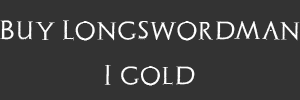
<style>
.page{position:relative;width:300px;height:100px;background:#333333}
.page>*{position:absolute;margin:0}
.t1{font:20.8px "Archeologicaps";color:#ffffff}
</style>
<div class="page">
<p class="t1" style="left:0px;top:20px;width:300px;height:21px">Buy Longswordman</p>
<p class="t1" style="left:104px;top:64px;width:91px;height:22px">I gold</p>
</div>
